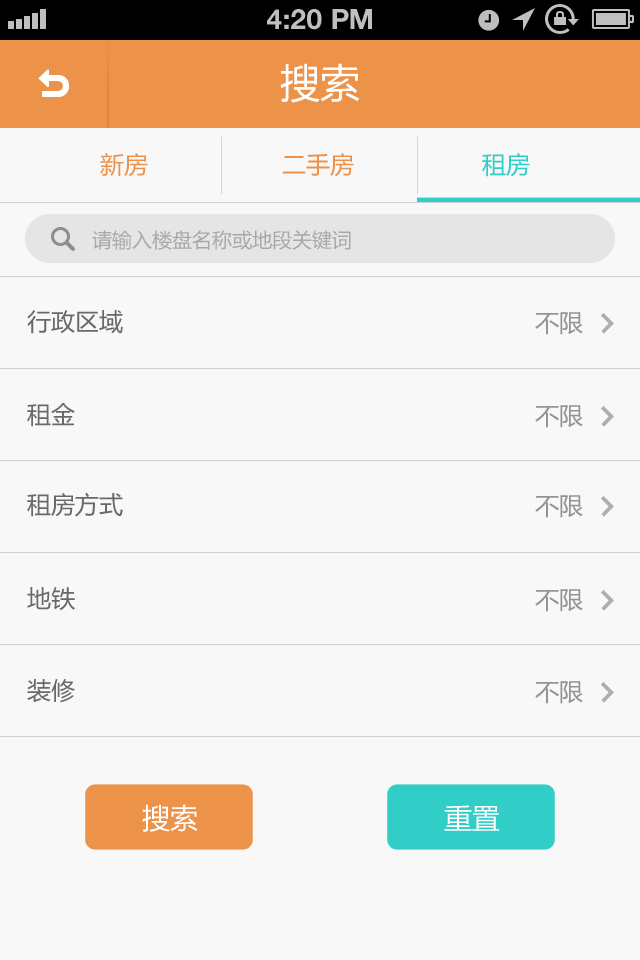
<style>
.page{position:relative;width:640px;height:960px;background:#f8f8f8}
.page>*{position:absolute;margin:0}
.t1{font:28px "HelveticaNeue-Bold";color:#bfbfbf;text-transform:uppercase}
.t2{font:40px "MicrosoftYaHei";color:#ffffff}
.t3{font:24px "MicrosoftYaHei";color:#ed9249}
.t4{font:24px "MicrosoftYaHei";color:#31cec8}
.t5{font:20px "MicrosoftYaHei";color:#a8a8a8}
.t6{font:24px "MicrosoftYaHei";color:#696969}
.t7{font:24px "MicrosoftYaHei";color:#949494}
.t8{font:28px "MicrosoftYaHei";color:#fffefe}
</style>
<div class="page">
<p class="t1" style="left:267px;top:9px;width:105px;height:21px">4:20 PM</p>
<p class="t2" style="left:280px;top:63px;width:80px;height:40px">搜索</p>
<p class="t3" style="left:100px;top:152px;width:48px;height:25px">新房</p>
<p class="t3" style="left:282px;top:153px;width:72px;height:24px">二手房</p>
<p class="t4" style="left:482px;top:153px;width:48px;height:24px">租房</p>
<p class="t5" style="left:92px;top:230px;width:259px;height:20px">请输入楼盘名称或地段关键词</p>
<p class="t6" style="left:27px;top:310px;width:96px;height:24px">行政区域</p>
<p class="t7" style="left:535px;top:312px;width:48px;height:23px">不限</p>
<p class="t6" style="left:27px;top:403px;width:48px;height:24px">租金</p>
<p class="t7" style="left:535px;top:405px;width:48px;height:23px">不限</p>
<p class="t6" style="left:27px;top:492px;width:96px;height:25px">租房方式</p>
<p class="t7" style="left:535px;top:495px;width:48px;height:23px">不限</p>
<p class="t6" style="left:27px;top:587px;width:48px;height:24px">地铁</p>
<p class="t7" style="left:535px;top:589px;width:48px;height:23px">不限</p>
<p class="t6" style="left:27px;top:679px;width:48px;height:24px">装修</p>
<p class="t7" style="left:535px;top:681px;width:48px;height:23px">不限</p>
<p class="t8" style="left:142px;top:804px;width:56px;height:28px">搜索</p>
<p class="t8" style="left:444px;top:805px;width:56px;height:26px">重置</p>
</div>
